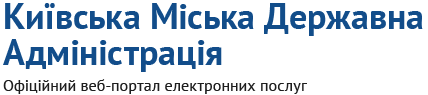
<style>
.page{position:relative;width:428px;height:95px;background:#ffffff}
.page>*{position:absolute;margin:0}
.t1{font:16px/26px "PTSans-Regular";color:#1e1e1e}
.t2{font:36px/36px "PTSans-Bold";color:#124d8a}
</style>
<div class="page">
<p class="t1" style="left:3px;top:3px;width:420px;height:91px"><span class="t2">Київська Міська Державна Адміністрація<br></span>Офіційний веб-портал електронних послуг</p>
</div>
